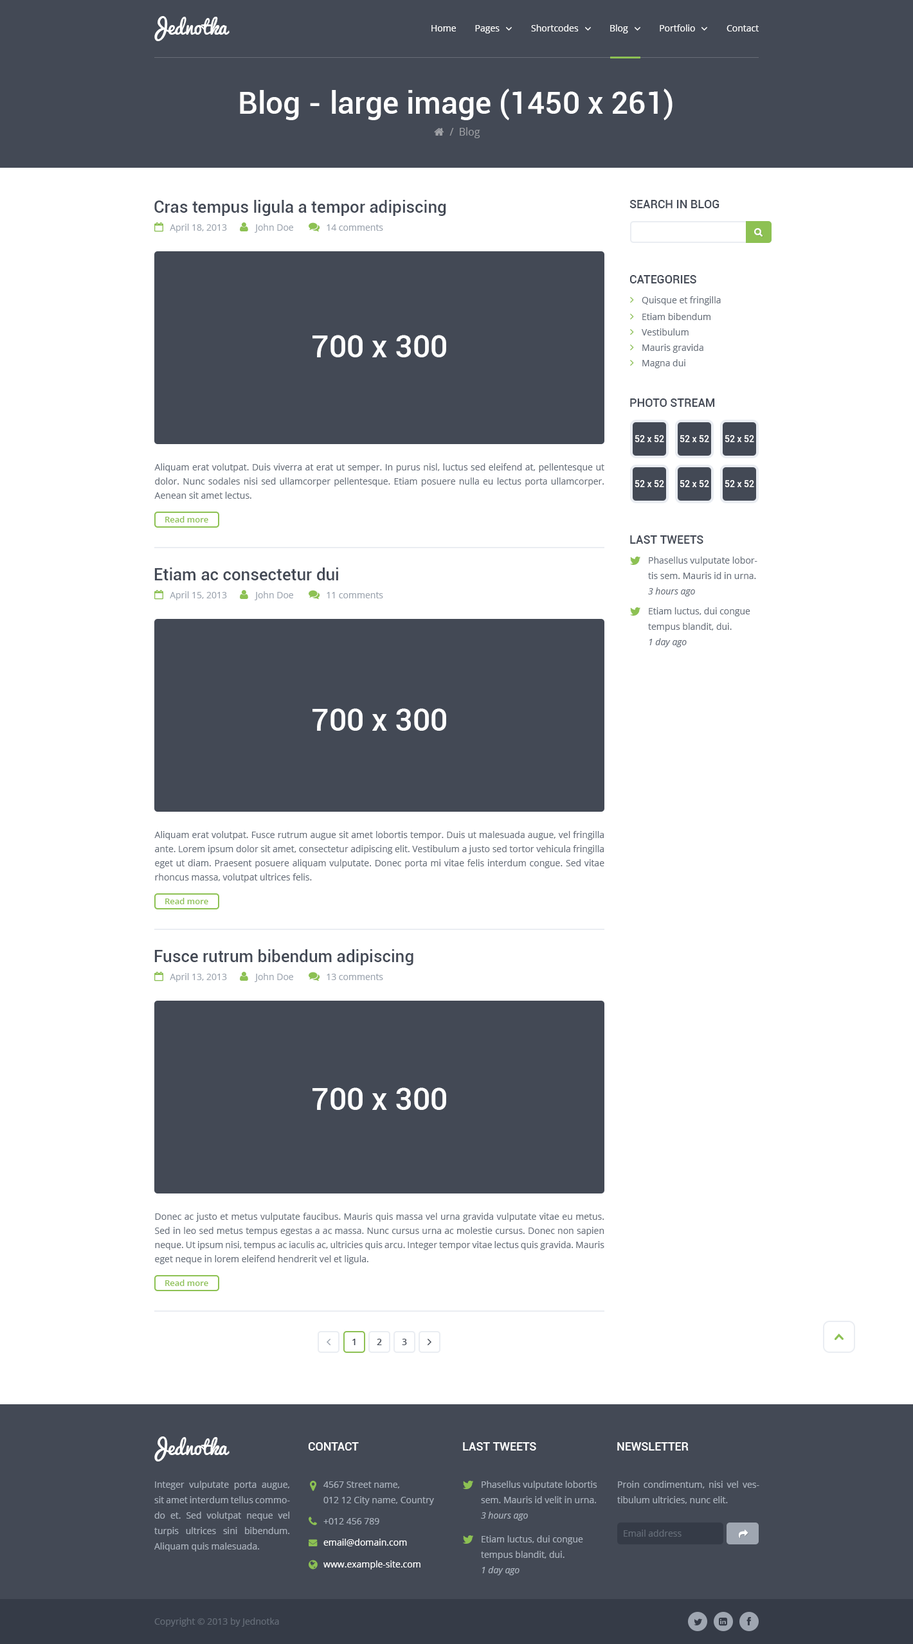
<style>
.page{position:relative;width:913px;height:1644px;background:#ffffff}
.page>*{position:absolute;margin:0}
.t1{font:19.3px "Pacifico";color:#ffffff}
.t2{font:9px "OpenSans";color:#ffffff}
.t3{font:30.9px "Roboto-Medium";color:#ffffff}
.t4{font:10.3px "OpenSans";color:#9fa1a6}
.t5{font:16.7px "Roboto-Medium";color:#434955}
.t6{font:11.6px "Roboto-Medium";color:#434955;text-transform:uppercase}
.t7{font:9px "OpenSans";color:#9ca4af}
.t8{font:9px "OpenSans";color:#676f7a}
.t9{font:9px "Roboto-Medium";color:#ffffff}
.t10{font:9px/14.1px "OpenSans";color:#676f7a}
.t11{font:8.4px "OpenSans-Semibold";color:#8dc153}
.t12{font:9px/15.4px "OpenSans";color:#676f7a}
.t13{font:9px "OpenSans-Italic";color:#676f7a}
.t14{font:9px "OpenSans-Semibold";color:#434955}
.t15{font:11.6px "Roboto-Medium";color:#ffffff;text-transform:uppercase}
.t16{font:9px/15.4px "OpenSans";color:#aab2bd}
.t17{font:9px "OpenSans-Italic";color:#aab2bd}
.t18{font:9px "OpenSans";color:#aab2bd}
.t19{font:9px "OpenSans";color:#656d78}
</style>
<div class="page">
<p class="t1" style="left:154px;top:16px;width:76px;height:25px">Jednotka</p>
<p class="t2" style="left:431px;top:25px;width:25px;height:7px">Home</p>
<p class="t2" style="left:475px;top:25px;width:25px;height:8px">Pages</p>
<p class="t2" style="left:531px;top:24px;width:48px;height:8px">Shortcodes</p>
<p class="t2" style="left:610px;top:24px;width:18px;height:9px">Blog</p>
<p class="t2" style="left:660px;top:24px;width:35px;height:8px">Portfolio</p>
<p class="t2" style="left:726px;top:25px;width:33px;height:7px">Contact</p>
<p class="t3" style="left:240px;top:89px;width:432px;height:31px">Blog - large image (1450 x 261)</p>
<p class="t4" style="left:449px;top:127px;width:31px;height:11px">/  Blog</p>
<p class="t5" style="left:154px;top:200px;width:292px;height:16px">Cras tempus ligula a tempor adipiscing</p>
<p class="t6" style="left:629px;top:200px;width:90px;height:8px">Search in blog</p>
<p class="t7" style="left:170px;top:224px;width:57px;height:9px">April 18, 2013</p>
<p class="t7" style="left:255px;top:224px;width:38px;height:9px">John Doe</p>
<p class="t7" style="left:327px;top:224px;width:56px;height:7px">14 comments</p>
<p class="t6" style="left:629px;top:275px;width:67px;height:9px">Categories</p>
<p class="t8" style="left:642px;top:296px;width:79px;height:9px">Quisque et fringilla</p>
<p class="t8" style="left:642px;top:313px;width:68px;height:7px">Etiam bibendum</p>
<p class="t8" style="left:642px;top:328px;width:46px;height:8px">Vestibulum</p>
<p class="t3" style="left:312px;top:335px;width:134px;height:22px">700 x 300</p>
<p class="t8" style="left:642px;top:344px;width:61px;height:9px">Mauris gravida</p>
<p class="t8" style="left:642px;top:359px;width:43px;height:9px">Magna dui</p>
<p class="t6" style="left:630px;top:399px;width:85px;height:8px">Photo stream</p>
<p class="t9" style="left:634px;top:435px;width:30px;height:7px">52 x 52</p>
<p class="t9" style="left:680px;top:435px;width:29px;height:7px">52 x 52</p>
<p class="t9" style="left:724px;top:435px;width:30px;height:7px">52 x 52</p>
<p class="t10" style="left:154px;top:464px;width:450px;height:35px;text-align:justify">Aliquam erat volutpat. Duis viverra at erat ut semper. In purus nisl, luctus sed eleifend at, pellentesque ut dolor. Nunc sodales nisi sed ullamcorper pellentesque. Etiam posuere nulla eu lectus porta ullamcorper. Aenean sit amet lectus.</p>
<p class="t9" style="left:634px;top:480px;width:30px;height:7px">52 x 52</p>
<p class="t9" style="left:680px;top:480px;width:29px;height:7px">52 x 52</p>
<p class="t9" style="left:724px;top:480px;width:30px;height:7px">52 x 52</p>
<p class="t11" style="left:165px;top:516px;width:43px;height:7px">Read more</p>
<p class="t6" style="left:630px;top:536px;width:73px;height:8px">Last tweets</p>
<p class="t12" style="left:648px;top:557px;width:109px;height:22px">Phasellus vulputate lobortis sem. Mauris id in urna.</p>
<p class="t5" style="left:154px;top:568px;width:184px;height:12px">Etiam ac consectetur dui</p>
<p class="t7" style="left:170px;top:591px;width:57px;height:9px">April 15, 2013</p>
<p class="t7" style="left:255px;top:591px;width:38px;height:9px">John Doe</p>
<p class="t7" style="left:327px;top:592px;width:56px;height:6px">11 comments</p>
<p class="t13" style="left:648px;top:588px;width:47px;height:9px">3 hours ago</p>
<p class="t12" style="left:648px;top:608px;width:102px;height:24px">Etiam luctus, dui congue tempus blandit, dui.</p>
<p class="t13" style="left:649px;top:638px;width:38px;height:9px">1 day ago</p>
<p class="t3" style="left:312px;top:708px;width:134px;height:23px">700 x 300</p>
<p class="t10" style="left:154px;top:831px;width:450px;height:52px;text-align:justify">Aliquam erat volutpat. Fusce rutrum augue sit amet lobortis tempor. Duis ut malesuada augue, vel fringilla ante. Lorem ipsum dolor sit amet, consectetur adipiscing elit. Vestibulum a justo sed tortor vehicula fringilla eget ut diam. Praesent posuere aliquam vulputate. Donec porta mi vitae felis interdum congue. Sed vitae rhoncus massa, volutpat ultrices felis.</p>
<p class="t11" style="left:165px;top:898px;width:43px;height:7px">Read more</p>
<p class="t5" style="left:154px;top:950px;width:259px;height:16px">Fusce rutrum bibendum adipiscing</p>
<p class="t7" style="left:170px;top:973px;width:57px;height:9px">April 13, 2013</p>
<p class="t7" style="left:255px;top:973px;width:38px;height:9px">John Doe</p>
<p class="t7" style="left:327px;top:974px;width:56px;height:6px">13 comments</p>
<p class="t3" style="left:312px;top:1088px;width:134px;height:22px">700 x 300</p>
<p class="t10" style="left:155px;top:1213px;width:449px;height:51px;text-align:justify">Donec ac justo et metus vulputate faucibus. Mauris quis massa vel urna gravida vulputate vitae eu metus. Sed in leo sed metus tempus egestas a ac massa. Nunc cursus urna ac molestie cursus. Donec non sapien neque. Ut ipsum nisi, tempus ac iaculis ac, ultricies quis arcu. Integer tempor vitae lectus quis gravida. Mauris eget neque in lorem eleifend hendrerit vel et ligula.</p>
<p class="t11" style="left:165px;top:1280px;width:43px;height:6px">Read more</p>
<p class="t14" style="left:352px;top:1339px;width:4px;height:7px">1</p>
<p class="t14" style="left:377px;top:1339px;width:5px;height:7px">2</p>
<p class="t14" style="left:402px;top:1339px;width:5px;height:7px">3</p>
<p class="t1" style="left:154px;top:1437px;width:76px;height:25px">Jednotka</p>
<p class="t15" style="left:308px;top:1443px;width:51px;height:8px">CONTACT</p>
<p class="t15" style="left:463px;top:1443px;width:73px;height:8px">Last tweets</p>
<p class="t15" style="left:617px;top:1443px;width:71px;height:8px">Newsletter</p>
<p class="t16" style="left:154px;top:1481px;width:136px;height:71px;text-align:justify">Integer vulputate porta augue, sit amet interdum tellus commodo et. Sed volutpat neque vel turpis ultrices sini bibendum. Aliquam quis malesuada.</p>
<p class="t16" style="left:323px;top:1482px;width:111px;height:24px">4567 Street name, <br>012 12 City name, Country</p>
<p class="t16" style="left:481px;top:1481px;width:116px;height:23px">Phasellus vulputate lobortis sem. Mauris id velit in urna.</p>
<p class="t16" style="left:617px;top:1481px;width:142px;height:23px;text-align:justify">Proin condimentum, nisi vel vestibulum ultricies, nunc elit.</p>
<p class="t17" style="left:481px;top:1512px;width:47px;height:9px">3 hours ago</p>
<p class="t18" style="left:323px;top:1518px;width:56px;height:7px">+012 456 789</p>
<p class="t2" style="left:323px;top:1539px;width:84px;height:8px">email@domain.com</p>
<p class="t16" style="left:481px;top:1536px;width:102px;height:24px">Etiam luctus, dui congue tempus blandit, dui.</p>
<p class="t19" style="left:624px;top:1530px;width:57px;height:7px">Email address</p>
<p class="t2" style="left:323px;top:1561px;width:97px;height:9px">www.example-site.com</p>
<p class="t17" style="left:482px;top:1567px;width:37px;height:9px">1 day ago</p>
<p class="t19" style="left:154px;top:1618px;width:125px;height:9px">Copyright © 2013 by Jednotka</p>
</div>
